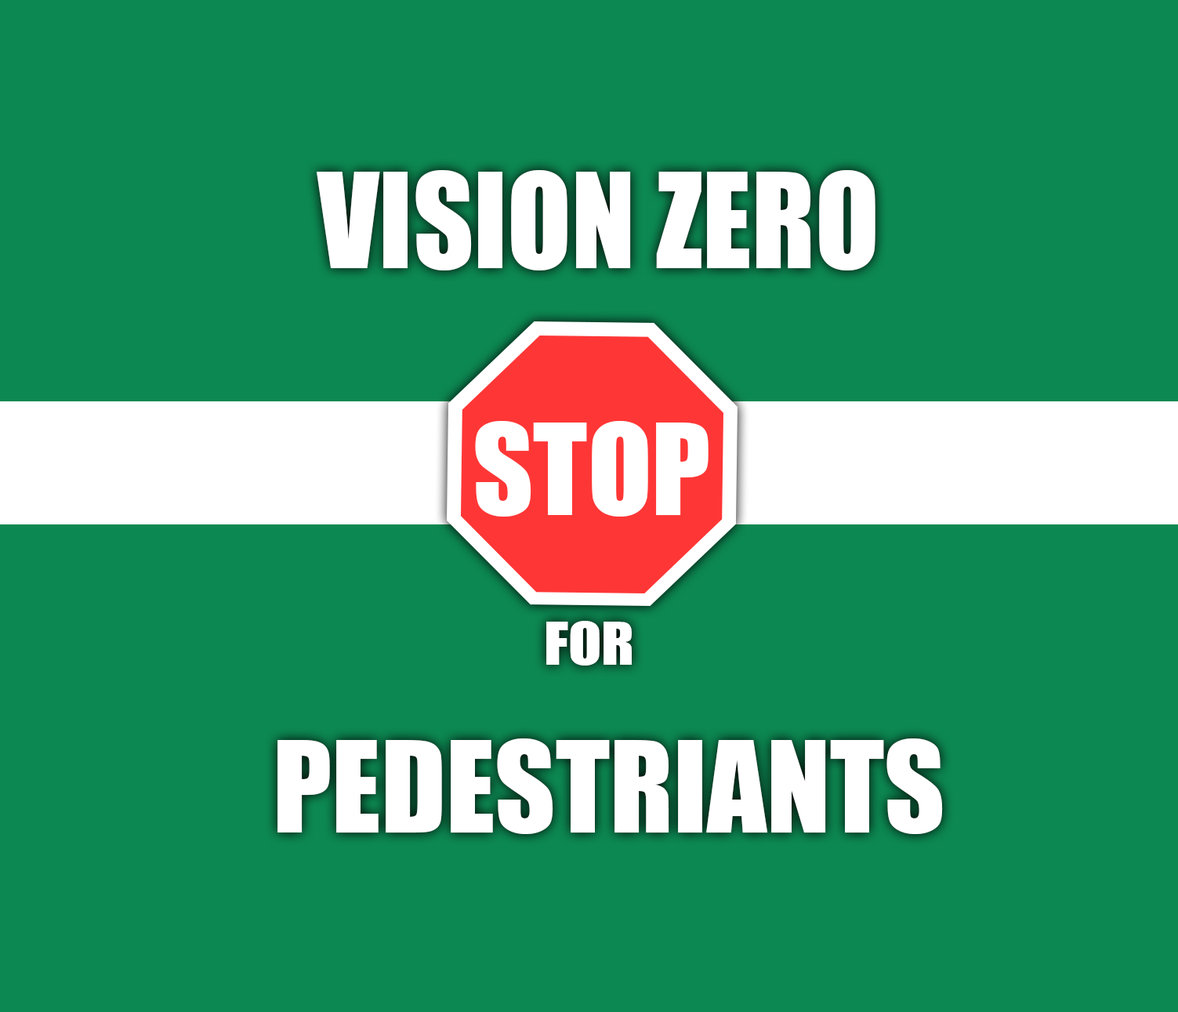
<style>
.page{position:relative;width:1178px;height:1012px;background:#0c8852}
.page>*{position:absolute;margin:0}
.t1{font:121.8px "Impact";color:#ffffff;scale:0.97 1}
.t2{font:116.4px "Impact";color:#ffffff}
.t3{font:54.9px "Impact";color:#ffffff;scale:1.11 1}
</style>
<div class="page">
<p class="t1" style="left:317px;top:170px;width:559px;height:100px">VISION ZERO</p>
<p class="t2" style="left:475px;top:421px;width:234px;height:96px">STOP</p>
<p class="t3" style="left:546px;top:621px;width:86px;height:45px">FOR</p>
<p class="t2" style="left:278px;top:738px;width:665px;height:96px">PEDESTRIANTS</p>
</div>
